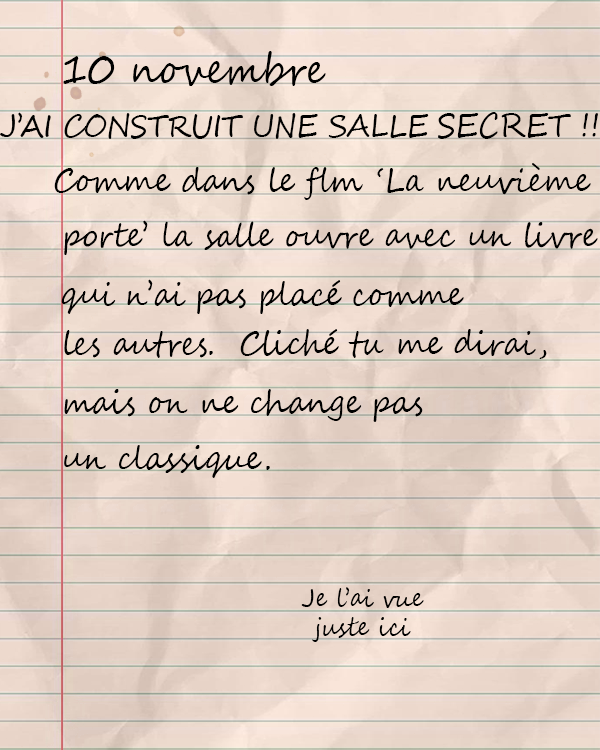
<style>
.page{position:relative;width:600px;height:750px}
.page>*{position:absolute;margin:0}
.t1{font:41.8px "SegoeScript";color:#000000;scale:0.9 1}
.t2{font:30.9px "SegoeScript";color:#000000;scale:0.9 1}
.t3{font:33.3px "SegoeScript";color:#000000;scale:0.9 1}
.t4{font:25px "SegoeScript";color:#000000;scale:0.9 1}
</style>
<div class="page">
<p class="t1" style="left:63px;top:51px;width:263px;height:35px">10 novembre</p>
<p class="t2" style="left:0px;top:112px;width:429px;height:27px">J’AI CONSTRUIT UNE SALLE</p>
<p class="t3" style="left:54px;top:163px;width:537px;height:37px">Comme dans le flm ‘La neuvième</p>
<p class="t3" style="left:64px;top:220px;width:534px;height:35px">porte’ la salle ouvre avec un livre</p>
<p class="t3" style="left:61px;top:279px;width:403px;height:35px">qui n’ai pas placé comme</p>
<p class="t3" style="left:64px;top:329px;width:483px;height:30px">les autres.  Cliché tu me dirai,</p>
<p class="t3" style="left:64px;top:389px;width:359px;height:33px">mais on ne change pas</p>
<p class="t3" style="left:64px;top:445px;width:206px;height:33px">un classique.</p>
<p class="t4" style="left:301px;top:587px;width:123px;height:21px">Je l’ai vue</p>
<p class="t4" style="left:312px;top:617px;width:99px;height:25px">juste ici</p>
</div>
